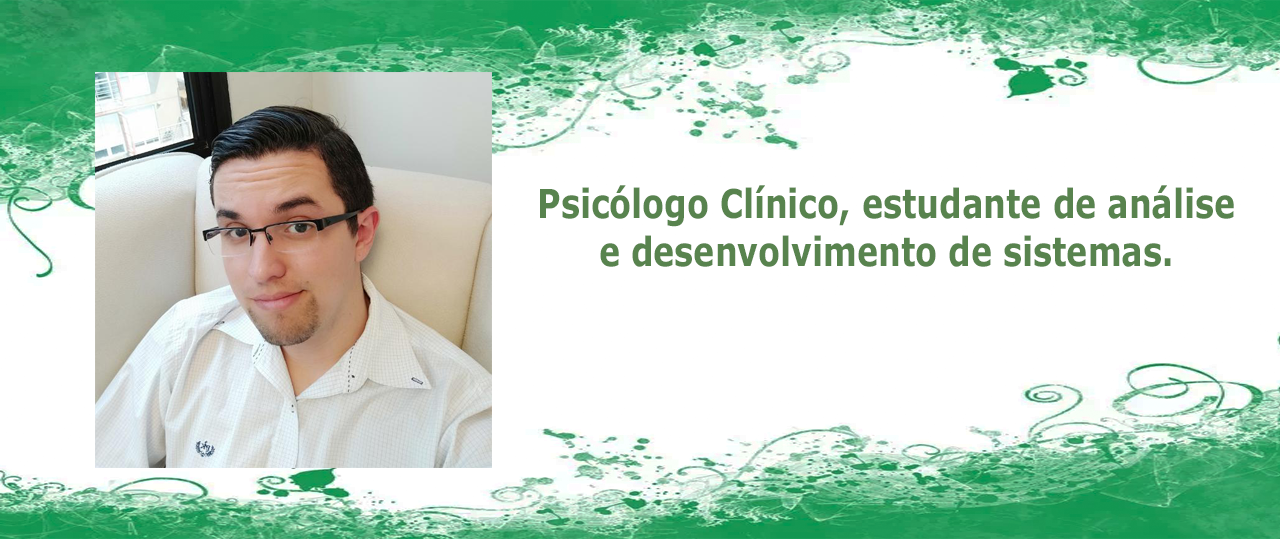
<style>
.page{position:relative;width:1280px;height:539px;background:#ffffff}
.page>*{position:absolute;margin:0}
.t1{font:40px "Verdana-Bold";color:#58834e;scale:0.8 1}
</style>
<div class="page">
<p class="t1" style="left:540px;top:185px;width:694px;height:82px;text-align:center">Psicólogo Clínico, estudante de análise e desenvolvimento de sistemas.</p>
</div>
